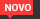
<style>
.page{position:relative;width:40px;height:19px;background:#f83a3a}
.page>*{position:absolute;margin:0}
.t1{font:9px "MicrosoftTaiLe-Bold";color:#faf7f7}
</style>
<div class="page">
<p class="t1" style="left:5px;top:4px;width:27px;height:7px">NOVO</p>
</div>
